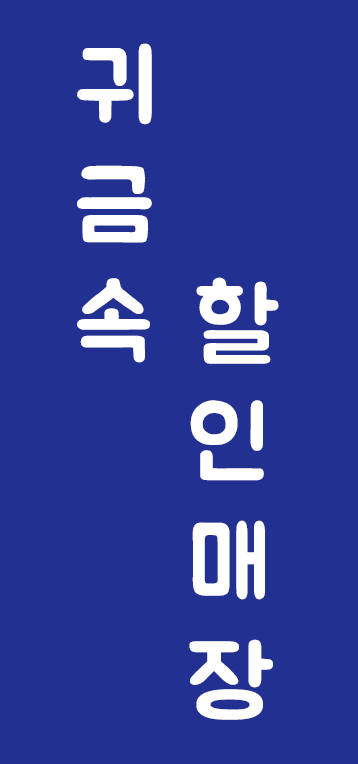
<style>
.page{position:relative;width:358px;height:764px;background:#213091}
.page>*{position:absolute;margin:0}
.t1{font:99.4px "BMJUA";letter-spacing:-0.025em;color:#ffffff}
</style>
<div class="page">
<p class="t1" style="left:77px;top:43px;width:202px;height:677px">귀<br>금<br>속  할<br>     인<br>     매<br>     장</p>
</div>
